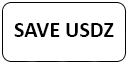
<style>
.page{position:relative;width:128px;height:64px;background:#ffffff}
.page>*{position:absolute;margin:0}
.t1{font:22px "Calibri-Bold";color:#000000}
</style>
<div class="page">
<p class="t1" style="left:14px;top:23px;width:100px;height:14px">SAVE USDZ</p>
</div>
